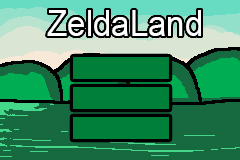
<style>
.page{position:relative;width:240px;height:160px;background:#176a3f}
.page>*{position:absolute;margin:0}
.t1{font:35.5px "ArialMT";color:#fffefe;scale:0.93 1}
</style>
<div class="page">
<p class="t1" style="left:47px;top:10px;width:154px;height:26px">ZeldaLand</p>
</div>
